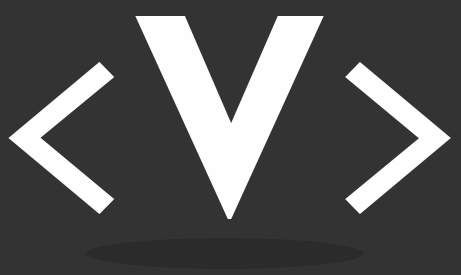
<style>
.page{position:relative;width:461px;height:275px;background:#333333}
.page>*{position:absolute;margin:0}
.t1{font:277px "Consolas";color:#fffefe}
.t2{font:277px "Geometric415BT-BlackA";color:#fffefe}
</style>
<div class="page">
<p class="t1" style="left:8px;top:16px;width:443px;height:203px">&lt;<span class="t2">V</span>&gt;</p>
</div>
